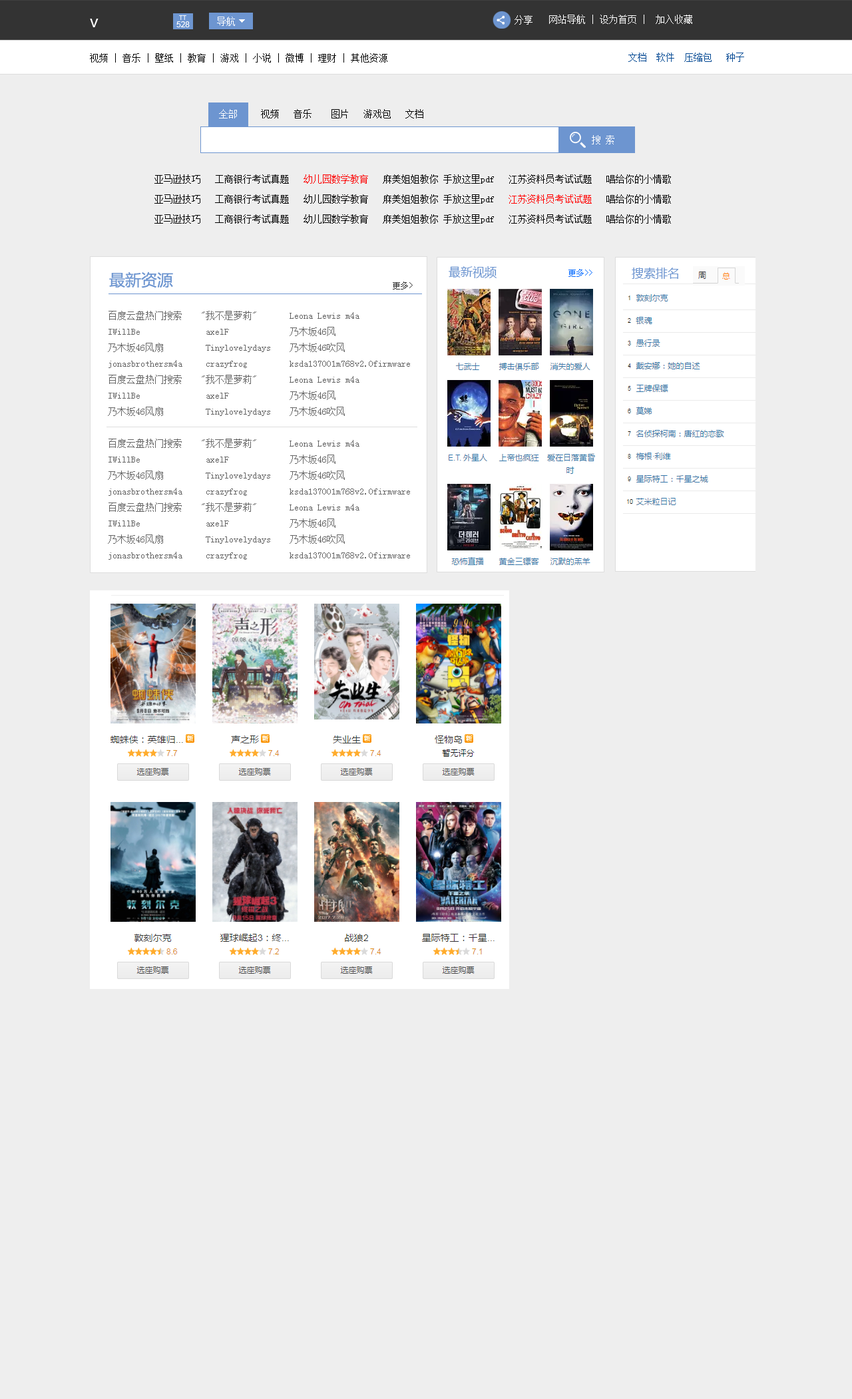
<style>
.page{position:relative;width:852px;height:1399px;background:#eeeeee}
.page>*{position:absolute;margin:0}
.t1{font:6.1px "ArialMT";color:#ffffff}
.t2{font:9.3px "SimSun";color:#ffffff}
.t3{font:16px "MicrosoftYaHei";color:#ffffff}
.t4{font:7.9px "ArialMT";color:#ffffff}
.t5{font:9.3px "SimSun";color:#000000}
.t6{font:9.3px "SimSun";color:#044a94}
.t7{font:9.3px/20px "SimSun";color:#000000}
.t8{font:9.3px/20px "SimSun";color:#fc0000}
.t9{font:9.3px/20px "SimSun";color:#ff0000}
.t10{font:12px "MicrosoftYaHei";color:#6d95d0}
.t11{font:8px "SimSun";color:#0c6eff}
.t12{font:16px "MicrosoftYaHei";color:#6d95d0}
.t13{font:8px "SimSun";color:#333333}
.t14{font:9.3px/16px "SimSun";color:#666666}
</style>
<div class="page">
<p class="t1" style="left:179px;top:15px;width:7px;height:5px">TT</p>
<p class="t2" style="left:217px;top:17px;width:18px;height:9px">导航</p>
<p class="t2" style="left:515px;top:15px;width:18px;height:10px">分享</p>
<p class="t2" style="left:549px;top:15px;width:143px;height:9px">网站导航 | 设为首页 |  加入收藏</p>
<p class="t3" style="left:90px;top:19px;width:9px;height:8px">v</p>
<p class="t4" style="left:176px;top:21px;width:14px;height:6px">528</p>
<p class="t5" style="left:90px;top:53px;width:297px;height:10px">视频 | 音乐 | 壁纸 | 教育 | 游戏 | 小说 | 微博 | 理财 | 其他资源</p>
<p class="t6" style="left:628px;top:53px;width:116px;height:9px">文档  软件  压缩包   种子</p>
<p class="t5" style="left:219px;top:109px;width:204px;height:9px"><span class="t2">全部</span>     视频   音乐    图片   游戏包   文档</p>
<p class="t2" style="left:592px;top:135px;width:22px;height:9px">搜 索</p>
<p class="t7" style="left:154px;top:174px;width:517px;height:50px">亚马逊技巧   工商银行考试真题   <span class="t8">幼儿园数学教育</span>   麻美姐姐教你 手放这里pdf   江苏资料员考试试题   唱给你的小情歌<br>亚马逊技巧   工商银行考试真题   幼儿园数学教育   麻美姐姐教你 手放这里pdf   <span class="t9">江苏资料员考试试题</span>   唱给你的小情歌 <br>亚马逊技巧   工商银行考试真题   幼儿园数学教育   麻美姐姐教你 手放这里pdf   江苏资料员考试试题   唱给你的小情歌</p>
<p class="t10" style="left:449px;top:266px;width:48px;height:12px">最新视频</p>
<p class="t11" style="left:569px;top:269px;width:23px;height:8px">更多&gt;&gt;</p>
<p class="t10" style="left:632px;top:268px;width:47px;height:12px">搜索排名</p>
<p class="t12" style="left:109px;top:272px;width:64px;height:16px">最新资源</p>
<p class="t13" style="left:393px;top:282px;width:20px;height:8px">更多&gt;</p>
<p class="t14" style="left:108px;top:311px;width:302px;height:249px">百度云盘热门搜索    "我不是萝莉"       Leona Lewis m4a  <br>IWillBe              axelF             乃木坂46风  <br>乃木坂46风扇         Tinylovelydays    乃木坂46吹风  <br>jonasbrothersm4a     crazyfrog         ksda137001m768v2.0firmware  <br>百度云盘热门搜索    "我不是萝莉"       Leona Lewis m4a  <br>IWillBe              axelF             乃木坂46风  <br>乃木坂46风扇         Tinylovelydays    乃木坂46吹风  <br>  <br>百度云盘热门搜索    "我不是萝莉"       Leona Lewis m4a  <br>IWillBe              axelF             乃木坂46风  <br>乃木坂46风扇         Tinylovelydays    乃木坂46吹风  <br>jonasbrothersm4a     crazyfrog         ksda137001m768v2.0firmware   <br>百度云盘热门搜索    "我不是萝莉"       Leona Lewis m4a  <br>IWillBe              axelF             乃木坂46风  <br>乃木坂46风扇         Tinylovelydays    乃木坂46吹风  <br>jonasbrothersm4a     crazyfrog         ksda137001m768v2.0firmware</p>
</div>
